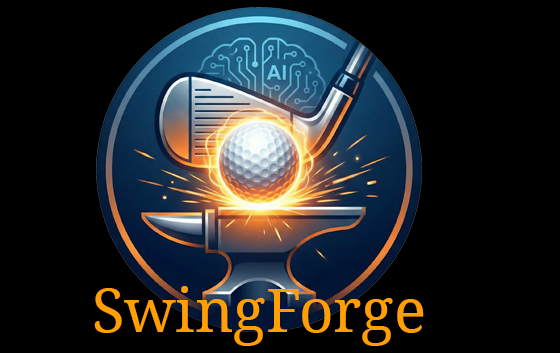
<style>
.page{position:relative;width:560px;height:353px;background:#000000}
.page>*{position:absolute;margin:0}
.t1{font:60px "NotoSerif";color:#ff9f04}
</style>
<div class="page">
<p class="t1" style="left:94px;top:286px;width:330px;height:60px">SwingForge</p>
</div>
